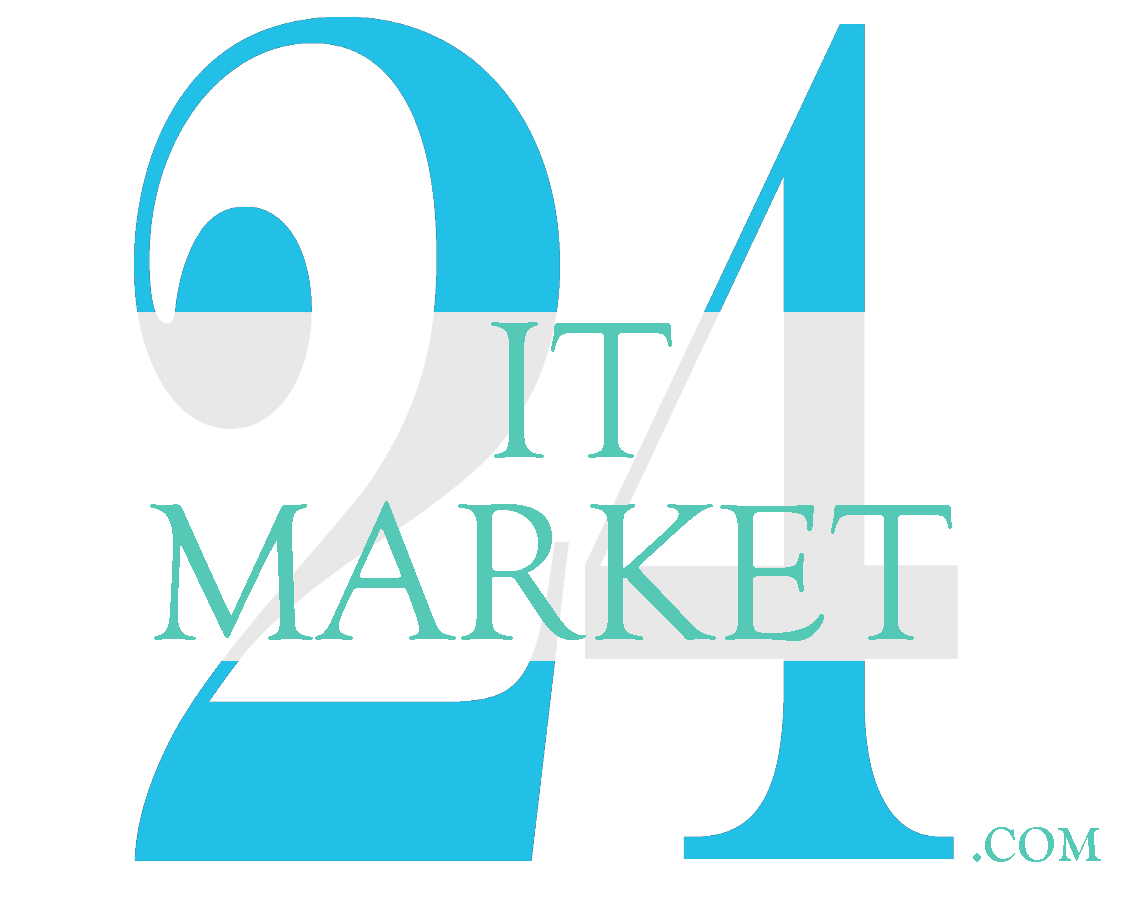
<style>
.page{position:relative;width:1140px;height:907px;background:#ffffff}
.page>*{position:absolute;margin:0}
.t1{font:200px "GoudyOldStyleT-Regular";color:#55c8b6}
.t2{font:50px "GoudyOldStyleT-Bold";color:#55c8b6}
</style>
<div class="page">
<p class="t1" style="left:491px;top:322px;width:181px;height:136px">IT</p>
<p class="t1" style="left:150px;top:501px;width:802px;height:140px">MARKET</p>
<p class="t2" style="left:973px;top:827px;width:128px;height:35px">.COM</p>
</div>
